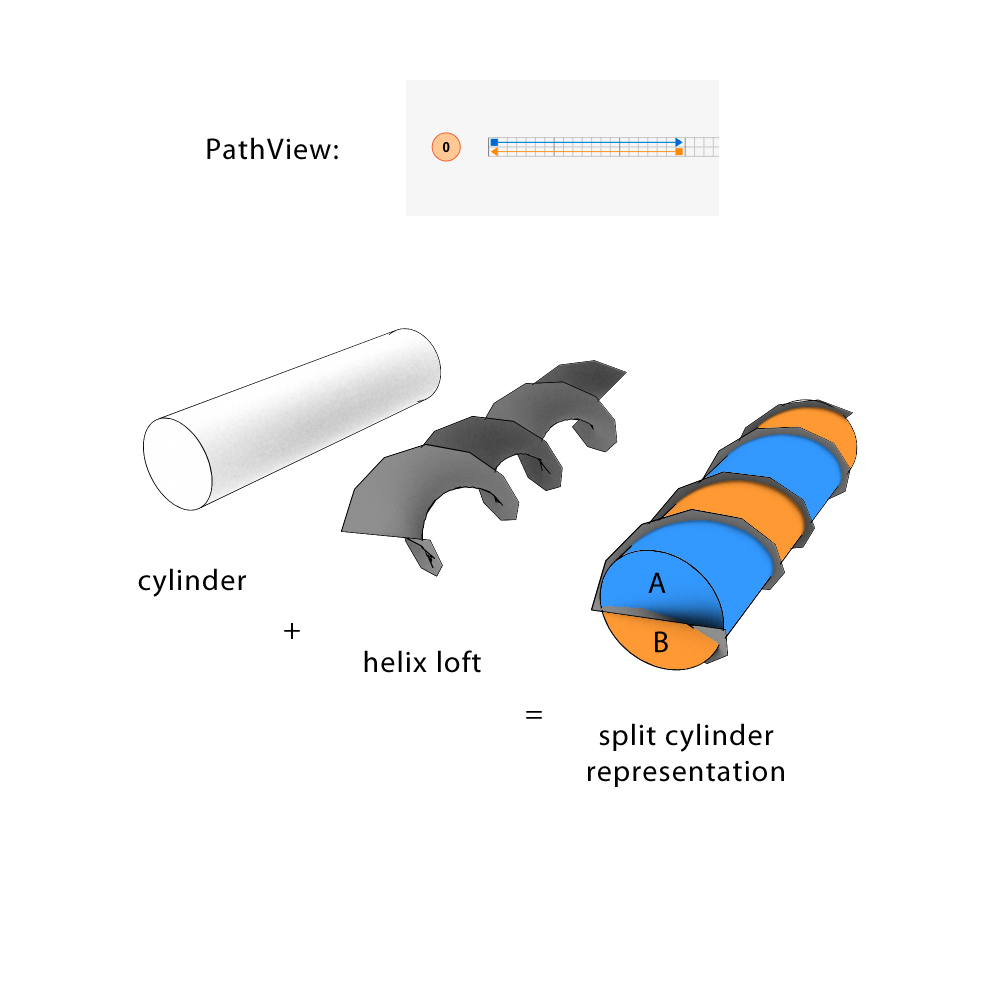
<style>
.page{position:relative;width:1000px;height:1000px;background:#ffffff}
.page>*{position:absolute;margin:0}
.t1{font:30px "MyriadPro-Regular";letter-spacing:0.04em;color:#000000}
</style>
<div class="page">
<p class="t1" style="left:207px;top:137px;width:131px;height:23px">PathView:</p>
<p class="t1" style="left:138px;top:568px;width:108px;height:29px">cylinder</p>
<p class="t1" style="left:648px;top:572px;width:18px;height:21px">A</p>
<p class="t1" style="left:284px;top:623px;width:16px;height:16px">+</p>
<p class="t1" style="left:655px;top:631px;width:13px;height:22px">B</p>
<p class="t1" style="left:364px;top:650px;width:117px;height:23px">helix loft</p>
<p class="t1" style="left:526px;top:711px;width:16px;height:8px">=</p>
<p class="t1" style="left:588px;top:723px;width:196px;height:64px;text-align:center">split cylinder<br>representation</p>
</div>
